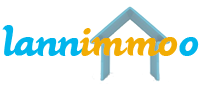
<style>
.page{position:relative;width:213px;height:98px;background:#ffffff}
.page>*{position:absolute;margin:0}
.t1{font:49px "BlackRose";color:#00b5ec}
.t2{font:49px "BlackRose";color:#f2ac04}
</style>
<div class="page">
<p class="t1" style="left:2px;top:25px;width:197px;height:31px">lann<span class="t2">immo</span>o</p>
</div>
